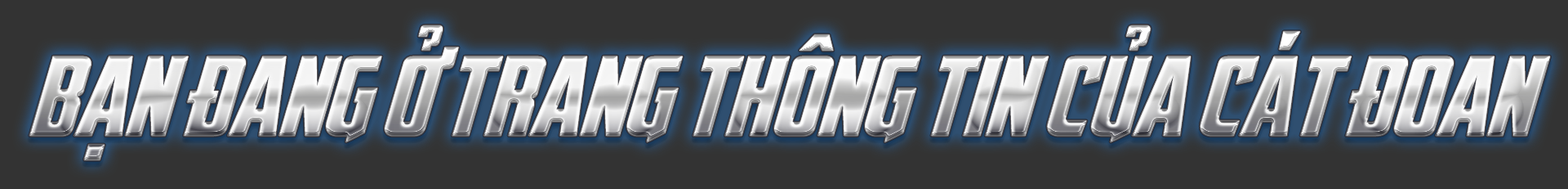
<style>
.page{position:relative;width:1568px;height:189px;background:#333333}
.page>*{position:absolute;margin:0}
.t1{font:108.9px "000AvegaeanceiCiel-Regular"}
</style>
<div class="page">
<p class="t1" style="left:29px;top:25px;width:1521px;height:135px">bạn đang ở trang thông tin của cát đoan</p>
</div>
